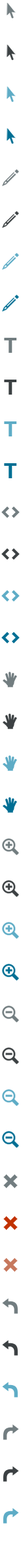
<style>
.page{position:relative;width:21px;height:1568px;background:#ffffff}
.page>*{position:absolute;margin:0}
.t1{font:20.9px "HelveticaNeue-Bold";color:#727d80}
.t2{font:20.9px "HelveticaNeue-Bold";color:#3c4143}
.t3{font:20.9px "HelveticaNeue-Bold";color:#5eacc6}
.t4{font:20.9px "HelveticaNeue-Bold";color:#006f94}
</style>
<div class="page">
<p class="t1" style="left:4px;top:338px;width:13px;height:15px">T</p>
<p class="t2" style="left:4px;top:380px;width:13px;height:15px">T</p>
<p class="t3" style="left:4px;top:421px;width:13px;height:15px">T</p>
<p class="t4" style="left:4px;top:463px;width:13px;height:15px">T</p>
</div>
